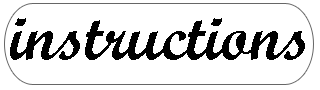
<style>
.page{position:relative;width:320px;height:90px;background:#ffffff}
.page>*{position:absolute;margin:0}
.t1{font:66.7px "ScriptMTBold";color:#000000}
</style>
<div class="page">
<p class="t1" style="left:10px;top:18px;width:295px;height:42px">instructions</p>
</div>
